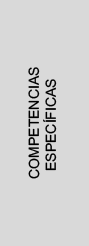
<style>
.page{position:relative;width:89px;height:246px;background:#d9d9d9}
.page>*{position:absolute;margin:0}
.t1{font:14px "ArialMT";color:#000000}
</style>
<div class="page">
<p class="t1" style="left:28px;top:67px;width:29px;height:112px;rotate:-90deg">COMPETENCIAS<br>  ESPECÍFICAS</p>
</div>
